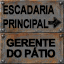
<style>
.page{position:relative;width:64px;height:64px}
.page>*{position:absolute;margin:0}
.t1{font:12px/13.3px "Arial-BoldMT";letter-spacing:-0.06em;color:#000000;text-transform:uppercase;font-weight:bold;scale:0.76 1}
.t2{font:10.7px/10.7px "Arial-BoldMT";letter-spacing:-0.06em;color:#000000;text-transform:uppercase;font-weight:bold}
</style>
<div class="page">
<p class="t1" style="left:3px;top:5px;width:52px;height:24px">Escadaria<br>principal</p>
<p class="t2" style="left:6px;top:38px;width:50px;height:20px;text-align:center">Gerente<br>dO pátio</p>
</div>
